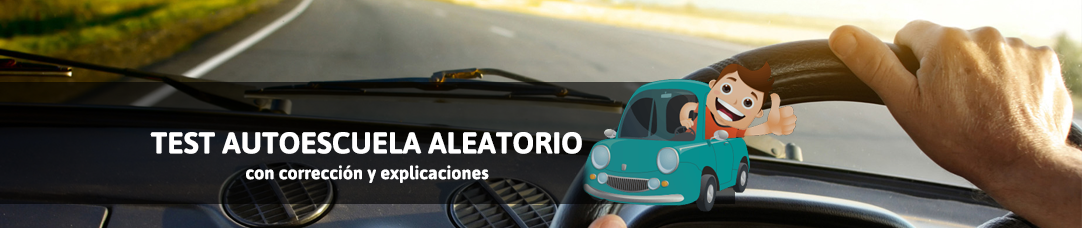
<style>
.page{position:relative;width:1082px;height:228px}
.page>*{position:absolute;margin:0}
.t1{font:30px "Asap-Bold";color:#ffffff}
.t2{font:18px "Asap-Bold";color:#ffffff}
</style>
<div class="page">
<p class="t1" style="left:150px;top:132px;width:432px;height:22px">TEST AUTOESCUELA ALEATORIO</p>
<p class="t2" style="left:246px;top:165px;width:243px;height:18px">con corrección y explicaciones</p>
</div>
